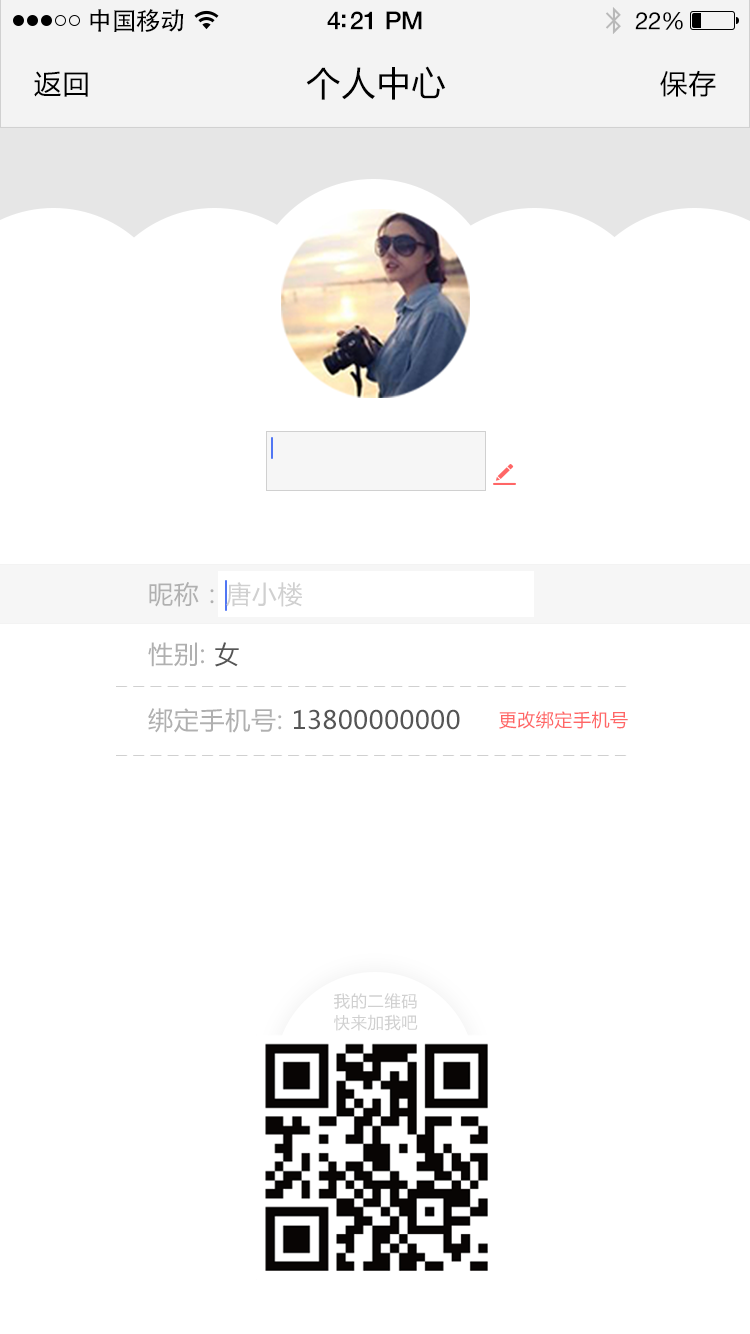
<style>
.page{position:relative;width:750px;height:1334px;background:#ffffff}
.page>*{position:absolute;margin:0}
.t1{font:25px "AdobeHeitiStd-Regular";letter-spacing:-0.025em;color:#000000}
.t2{font:25px "HelveticaNeue-Medium";letter-spacing:-0.02em;color:#000000}
.t3{font:24px "HelveticaNeue";letter-spacing:-0.02em;color:#000000}
.t4{font:27px "MicrosoftYaHei";letter-spacing:0.05em;color:#000000}
.t5{font:34px "MicrosoftYaHei";letter-spacing:0.03em;color:#000000}
.t6{font:25px "MicrosoftYaHei";letter-spacing:0.03em;color:#b0b0b0}
.t7{font:25px "MicrosoftYaHei";letter-spacing:0.03em;color:#d0d0d0}
.t8{font:25px "MicrosoftYaHei";letter-spacing:0.03em;color:#555555}
.t9{font:18px "MicrosoftYaHei";letter-spacing:0.03em;color:#ff6666}
.t10{font:16.4px "MicrosoftYaHei";letter-spacing:0.03em;color:#d0d0d0}
</style>
<div class="page">
<p class="t1" style="left:90px;top:9px;width:94px;height:23px">中国移动</p>
<p class="t2" style="left:327px;top:11px;width:95px;height:19px">4:21 PM</p>
<p class="t3" style="left:635px;top:12px;width:48px;height:18px">22%</p>
<p class="t4" style="left:34px;top:71px;width:54px;height:26px">返回</p>
<p class="t5" style="left:306px;top:66px;width:140px;height:34px">个人中心</p>
<p class="t4" style="left:660px;top:70px;width:56px;height:27px">保存</p>
<p class="t6" style="left:149px;top:582px;width:65px;height:25px">昵称：</p>
<p class="t7" style="left:226px;top:582px;width:76px;height:25px">唐小楼</p>
<p class="t6" style="left:148px;top:642px;width:91px;height:25px">性别: <span class="t8">女</span></p>
<p class="t8" style="left:148px;top:708px;width:312px;height:25px"><span class="t6">绑定手机号: </span>13800000000</p>
<p class="t9" style="left:499px;top:711px;width:129px;height:18px">更改绑定手机号</p>
<p class="t10" style="left:334px;top:993px;width:83px;height:16px">我的二维码</p>
<p class="t10" style="left:334px;top:1014px;width:84px;height:17px">快来加我吧</p>
</div>
